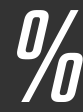
<style>
.page{position:relative;width:83px;height:112px;background:#333333}
.page>*{position:absolute;margin:0}
.t1{font:128px "BigNoodleTitling-Oblique";color:#ffffff;font-style:italic}
</style>
<div class="page">
<p class="t1" style="left:17px;top:10px;width:66px;height:92px">%</p>
</div>
